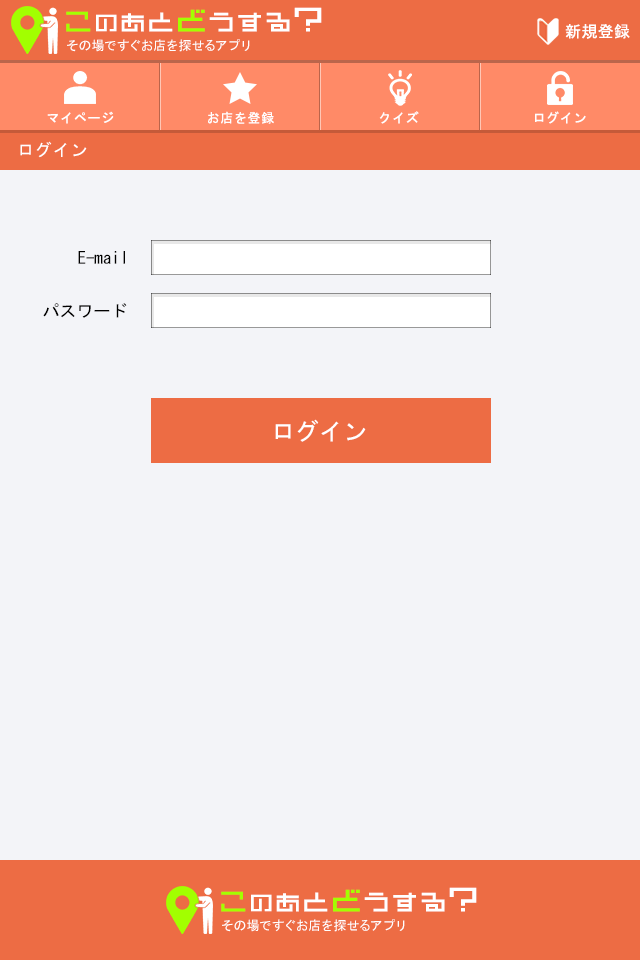
<style>
.page{position:relative;width:640px;height:960px;background:#f3f4f8}
.page>*{position:absolute;margin:0}
.t1{font:27.6px "DBstraight12";letter-spacing:0.05em;color:#ffffff;font-weight:bold;scale:0.96 1}
.t2{font:28.8px "DBstraight12";letter-spacing:0.05em;color:#a2ff00;font-weight:bold;scale:0.96 1}
.t3{font:24.5px "DBstraight12";letter-spacing:0.05em;color:#ffffff;font-weight:bold;scale:0.96 1}
.t4{font:26.7px "DBstraight12";letter-spacing:0.05em;color:#ffffff;font-weight:bold;scale:0.96 1}
.t5{font:27.7px "DBstraight12";letter-spacing:0.05em;color:#ffffff;font-weight:bold;scale:0.96 1}
.t6{font:31.9px "DBstraight12";letter-spacing:0.05em;color:#a2ff00;font-weight:bold;scale:0.96 1}
.t7{font:34.9px "DBstraight12";letter-spacing:0.05em;color:#ffffff;font-weight:bold;scale:0.96 1}
.t8{font:16px "MS-Gothic";letter-spacing:0.05em;color:#ffffff}
.t9{font:13px "MS-Gothic";letter-spacing:0.05em;color:#ffffff}
.t10{font:17px "MS-Gothic";letter-spacing:0.05em;color:#ffffff}
.t11{font:17px "MS-Gothic";color:#000000}
.t12{font:24px "MS-Gothic";color:#ffffff}
</style>
<div class="page">
<p class="t1" style="left:66px;top:7px;width:256px;height:25px"><span class="t2">こ</span><span class="t3">の</span><span class="t4">あ</span><span class="t5">と</span><span class="t6">ど</span>うする<span class="t7">?</span></p>
<p class="t8" style="left:565px;top:24px;width:65px;height:15px">新規登録</p>
<p class="t9" style="left:67px;top:39px;width:183px;height:13px">その場ですぐお店を探せるアプリ</p>
<p class="t9" style="left:47px;top:111px;width:67px;height:13px">マイページ</p>
<p class="t9" style="left:208px;top:111px;width:66px;height:13px">お店を登録</p>
<p class="t9" style="left:379px;top:111px;width:40px;height:13px">クイズ</p>
<p class="t9" style="left:535px;top:111px;width:51px;height:13px">ログイン</p>
<p class="t10" style="left:20px;top:141px;width:67px;height:17px">ログイン</p>
<p class="t11" style="left:78px;top:251px;width:47px;height:13px">E-mail</p>
<p class="t11" style="left:43px;top:303px;width:84px;height:15px">パスワード</p>
<p class="t12" style="left:275px;top:419px;width:91px;height:23px">ログイン</p>
<p class="t1" style="left:221px;top:887px;width:256px;height:25px"><span class="t2">こ</span><span class="t3">の</span><span class="t4">あ</span><span class="t5">と</span><span class="t6">ど</span>うする<span class="t7">?</span></p>
<p class="t9" style="left:222px;top:919px;width:183px;height:13px">その場ですぐお店を探せるアプリ</p>
</div>
